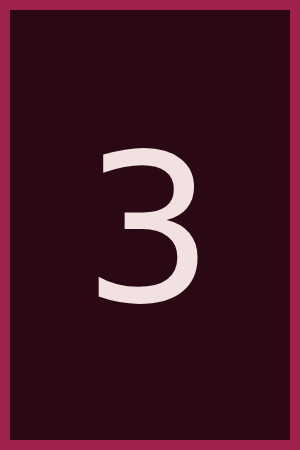
<style>
.page{position:relative;width:300px;height:450px;background:#2a0914}
.page>*{position:absolute;margin:0}
.t1{font:206px "DejaVuSans";color:#f2e1e1}
</style>
<div class="page">
<p class="t1" style="left:98px;top:148px;width:100px;height:156px">3</p>
</div>
